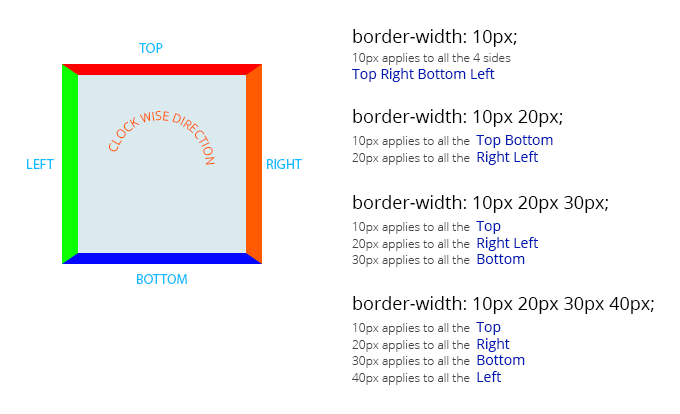
<style>
.page{position:relative;width:680px;height:414px;background:#ffffff}
.page>*{position:absolute;margin:0}
.t1{font:12px "OpenSans-Light";color:#444444}
.t2{font:18px "OpenSans";color:#000000}
.t3{font:14px "OpenSans";color:#0019b2}
.t4{font:14px "MyriadPro-Regular";color:#0bbcff}
.t5{font:12px "OpenSans-Light";color:#ff5a00}
</style>
<div class="page">
<p class="t1" style="left:352px;top:29px;width:165px;height:53px"><span class="t2">border-width: 10px;<br></span>10px applies to all the 4 sides<br><span class="t3">Top Right Bottom Left</span></p>
<p class="t4" style="left:139px;top:43px;width:24px;height:10px">TOP</p>
<p class="t5" style="left:108px;top:111px;width:107px;height:54px">CLOCK WISE DIRECTION</p>
<p class="t2" style="left:352px;top:109px;width:211px;height:56px">border-width: 10px 20px;<br><span class="t1">10px applies to all the  </span><span class="t3">Top Bottom<br></span><span class="t1">20px applies to all the  </span><span class="t3">Right Left</span></p>
<p class="t4" style="left:27px;top:159px;width:27px;height:10px">LEFT</p>
<p class="t4" style="left:267px;top:159px;width:35px;height:10px">RIGHT</p>
<p class="t2" style="left:352px;top:195px;width:256px;height:72px">border-width: 10px 20px 30px;<br><span class="t1">10px applies to all the  </span><span class="t3">Top<br></span><span class="t1">20px applies to all the  </span><span class="t3">Right Left<br></span><span class="t1">30px applies to all the  </span><span class="t3">Bottom</span></p>
<p class="t4" style="left:137px;top:274px;width:50px;height:10px">BOTTOM</p>
<p class="t2" style="left:352px;top:296px;width:302px;height:89px">border-width: 10px 20px 30px 40px;<br><span class="t1">10px applies to all the  </span><span class="t3">Top<br></span><span class="t1">20px applies to all the  </span><span class="t3">Right<br></span><span class="t1">30px applies to all the  </span><span class="t3">Bottom<br></span><span class="t1">40px applies to all the  </span><span class="t3">Left</span></p>
</div>
